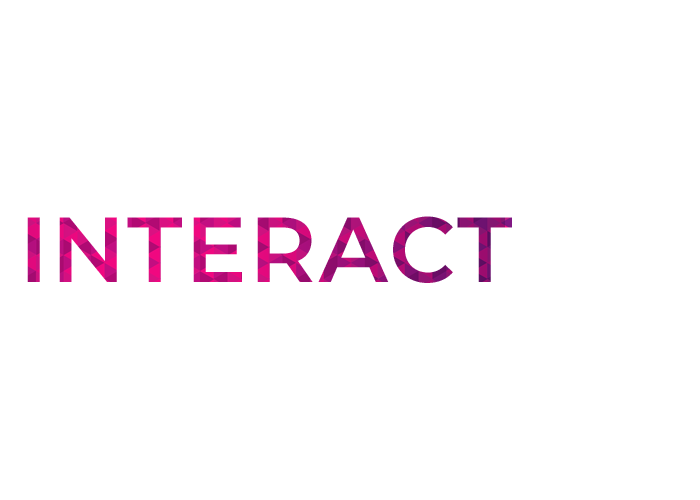
<style>
.page{position:relative;width:700px;height:500px;background:#ffffff}
.page>*{position:absolute;margin:0}
.t1{font:92px "Montserrat-SemiBold";letter-spacing:0.025em}
</style>
<div class="page">
<p class="t1" style="left:27px;top:216px;width:644px;height:67px">INTERACTIVE</p>
</div>
